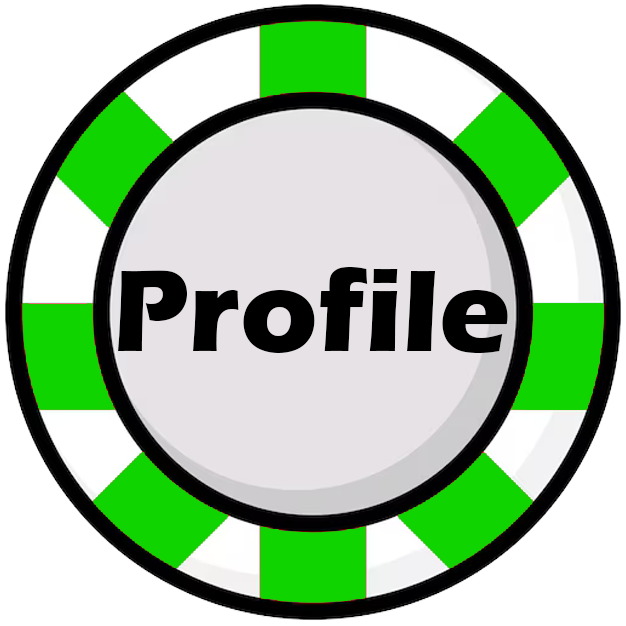
<style>
.page{position:relative;width:626px;height:626px;background:#ffffff}
.page>*{position:absolute;margin:0}
.t1{font:120px "ErasITC-Bold";color:#000000}
</style>
<div class="page">
<p class="t1" style="left:118px;top:267px;width:390px;height:86px">Profile</p>
</div>
